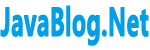
<style>
.page{position:relative;width:150px;height:50px;background:#ffffff}
.page>*{position:absolute;margin:0}
.t1{font:37.1px "MicrosoftYaHei-Bold";color:#00a0e9;font-weight:bold;scale:0.57 1}
</style>
<div class="page">
<p class="t1" style="left:0px;top:5px;width:149px;height:41px">JavaBlog.Net</p>
</div>
